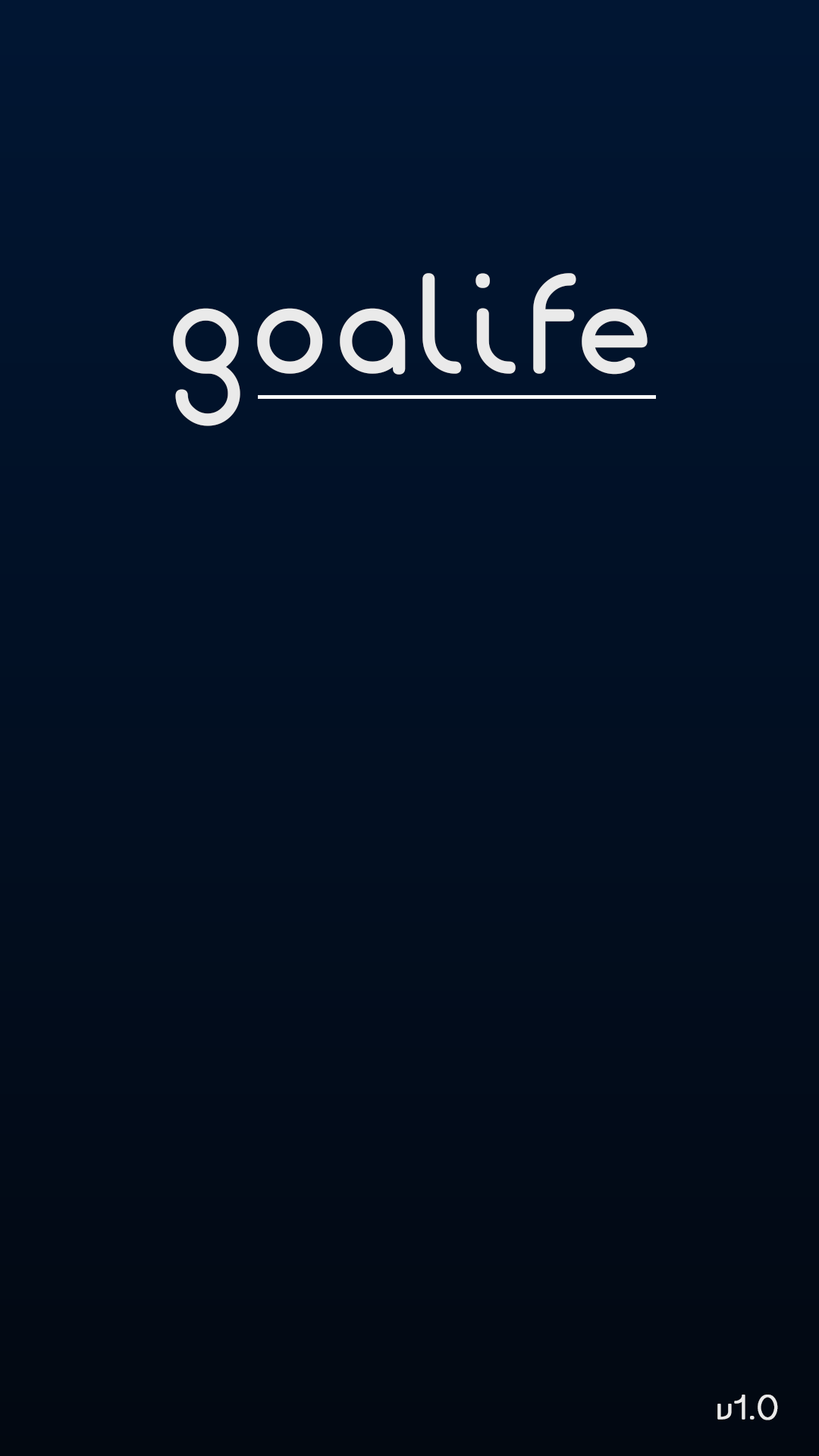
<style>
.page{position:relative;width:819px;height:1456px}
.page>*{position:absolute;margin:0}
.t1{font:151.6px "Giro-Light";color:#eaeaea;font-weight:bold}
.t2{font:37.9px "Giro-Light";color:#eaeaea;font-weight:bold}
</style>
<div class="page">
<p class="t1" style="left:173px;top:273px;width:475px;height:153px">goalife</p>
<p class="t2" style="left:717px;top:1395px;width:61px;height:25px">v1.0</p>
</div>
